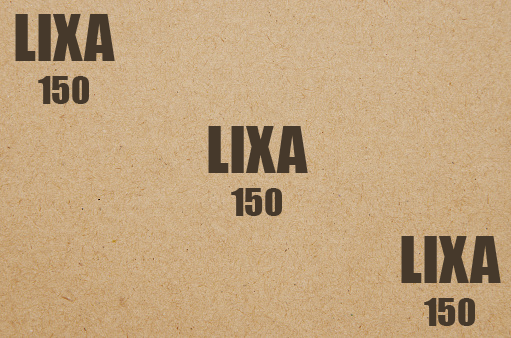
<style>
.page{position:relative;width:511px;height:338px}
.page>*{position:absolute;margin:0}
.t1{font:60px "Impact";color:#46392b}
.t2{font:36px "Impact";color:#46392b}
</style>
<div class="page">
<p class="t1" style="left:15px;top:14px;width:100px;height:90px;text-align:center">LIXA<br><span class="t2">150</span></p>
<p class="t1" style="left:208px;top:126px;width:100px;height:90px;text-align:center">LIXA<br><span class="t2">150</span></p>
<p class="t1" style="left:401px;top:236px;width:100px;height:90px;text-align:center">LIXA<br><span class="t2">150</span></p>
</div>
